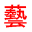
<style>
.page{position:relative;width:32px;height:32px;background:#ffffff}
.page>*{position:absolute;margin:0}
.t1{font:25px "MS-Gothic";color:#ff0000}
</style>
<div class="page">
<p class="t1" style="left:4px;top:4px;width:23px;height:24px">藝</p>
</div>
